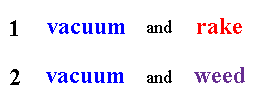
<style>
.page{position:relative;width:260px;height:100px;background:#ffffff}
.page>*{position:absolute;margin:0}
.t1{font:24px "TimesNewRomanPS-BoldMT";color:#000000}
.t2{font:24px "TimesNewRomanPS-BoldMT";color:#0000ff}
.t3{font:18px "TimesNewRomanPSMT";color:#000000}
.t4{font:24px "TimesNewRomanPS-BoldMT";color:#ff0000}
.t5{font:24px "TimesNewRomanPS-BoldMT";color:#662d91}
</style>
<div class="page">
<p class="t1" style="left:10px;top:20px;width:8px;height:16px">1</p>
<p class="t2" style="left:47px;top:23px;width:78px;height:11px">vacuum</p>
<p class="t3" style="left:147px;top:20px;width:25px;height:13px">and</p>
<p class="t4" style="left:197px;top:18px;width:45px;height:16px">rake</p>
<p class="t1" style="left:10px;top:69px;width:10px;height:16px">2</p>
<p class="t2" style="left:46px;top:72px;width:78px;height:11px">vacuum</p>
<p class="t3" style="left:147px;top:70px;width:25px;height:13px">and</p>
<p class="t5" style="left:194px;top:67px;width:51px;height:16px">weed</p>
</div>
